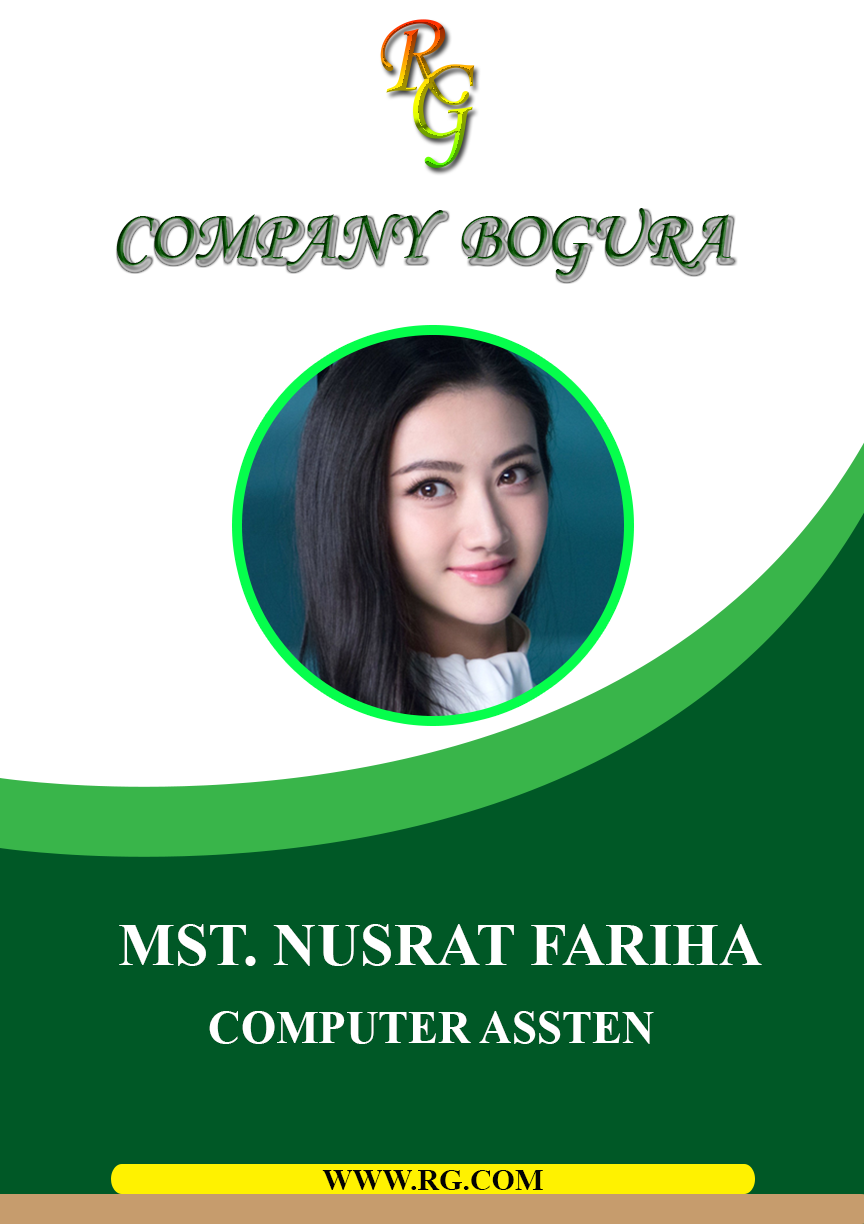
<style>
.page{position:relative;width:864px;height:1224px;background:#ffffff}
.page>*{position:absolute;margin:0}
.t1{font:118.6px "MonotypeCorsiva";text-transform:uppercase}
.t2{font:120px "MonotypeCorsiva";text-transform:uppercase}
.t3{font:72px "MonotypeCorsiva";text-transform:uppercase}
.t4{font:60px "TimesNewRomanPS-BoldMT";color:#ffffff;text-transform:uppercase}
.t5{font:45px "TimesNewRomanPS-BoldMT";color:#ffffff;text-transform:uppercase}
.t6{font:30px "TimesNewRomanPS-BoldMT";color:#020202;text-transform:uppercase}
</style>
<div class="page">
<p class="t1" style="left:380px;top:19px;width:89px;height:87px;rotate:-3deg">r</p>
<p class="t2" style="left:413px;top:64px;width:62px;height:104px;rotate:-7deg">g</p>
<p class="t3" style="left:116px;top:208px;width:615px;height:68px">company  bogura</p>
<p class="t4" style="left:119px;top:924px;width:643px;height:42px">mst. nusrat fariha</p>
<p class="t5" style="left:209px;top:1011px;width:445px;height:33px">computer assten</p>
<p class="t6" style="left:322px;top:1170px;width:221px;height:20px">www.rg.com</p>
</div>
